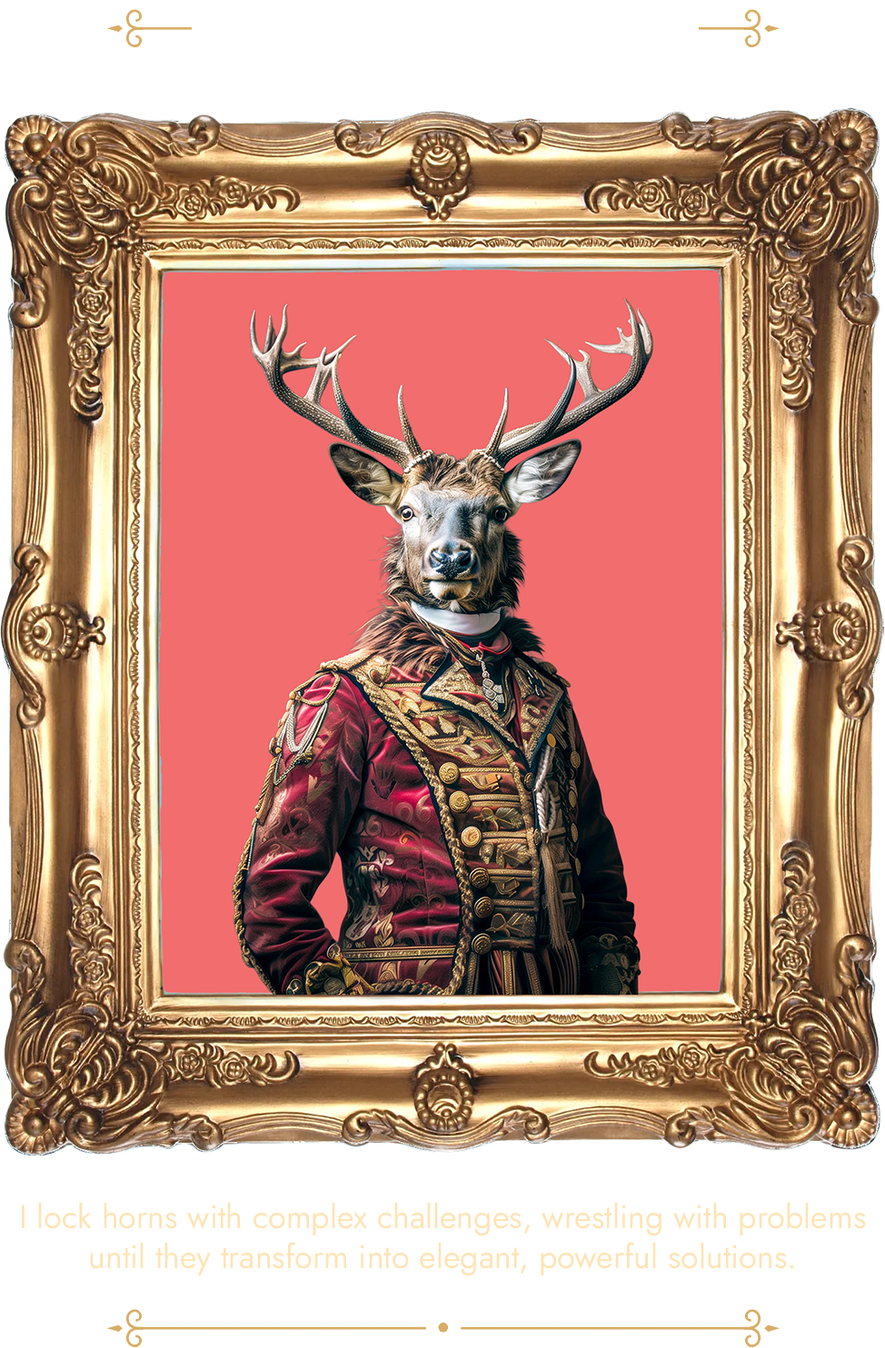
<style>
.page{position:relative;width:885px;height:1348px;background:#ffffff}
.page>*{position:absolute;margin:0}
.t1{font:32.7px "JostRoman_376.000wght_0ital";color:#ffe3b3}
</style>
<div class="page">
<p class="t1" style="left:22px;top:1203px;width:844px;height:73px;text-align:center">I lock horns with complex challenges, wrestling with problems until they transform into elegant, powerful solutions.</p>
</div>
